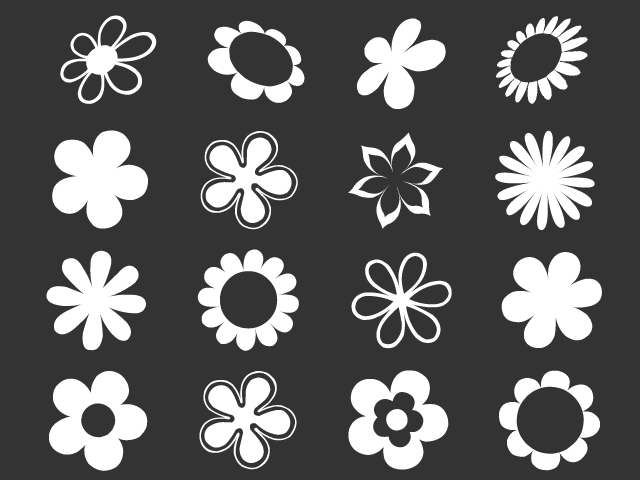
<style>
.page{position:relative;width:640px;height:480px;background:#333333}
.page>*{position:absolute;margin:0}
.t1{font:100px "saru's-Flower-Ding-(sRB)";color:#ffffff}
</style>
<div class="page">
<p class="t1" style="left:46px;top:15px;width:556px;height:456px;text-align:center">l c b n<br>A B X N<br>I L G F<br>C B D H</p>
</div>
